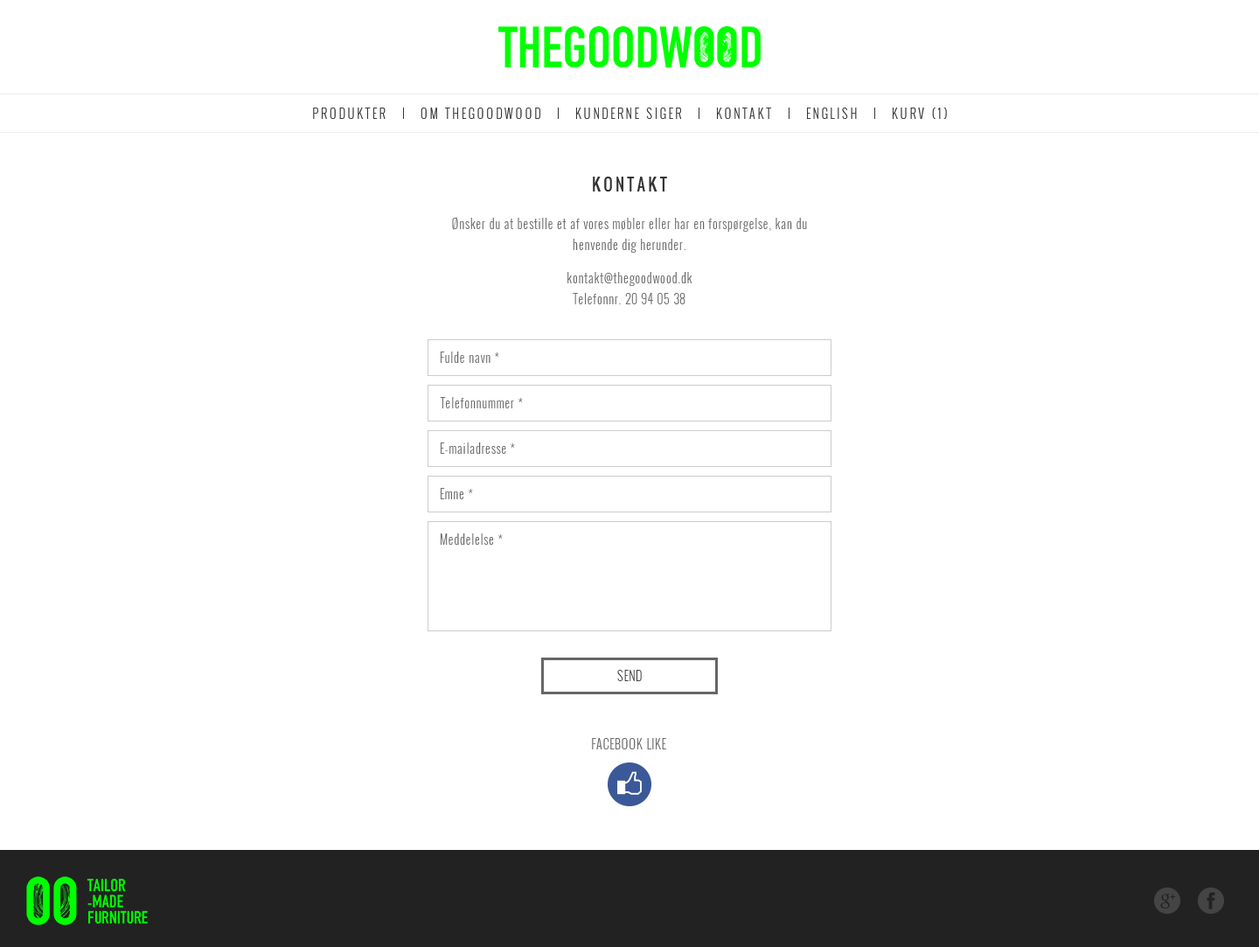
<style>
.page{position:relative;width:1259px;height:947px;background:#ffffff}
.page>*{position:absolute;margin:0}
.t1{font:15.7px "Oswald-Regular";letter-spacing:0.2em;color:#333333;text-transform:uppercase}
.t2{font:12.2px/21px "Oswald-Light";letter-spacing:0.05em;color:#666666}
.t3{font:12.2px/16.6px "Oswald-Light";letter-spacing:0.05em;color:#666666}
.t4{font:12.2px "Oswald-Light";letter-spacing:0.05em;color:#666666}
.t5{font:12.2px "Oswald-Light";letter-spacing:0.05em;color:#333333;text-transform:uppercase}
</style>
<div class="page">
<p class="t1" style="left:593px;top:177px;width:74px;height:14px">Kontakt</p>
<p class="t2" style="left:452px;top:217px;width:355px;height:87px;text-align:center">Ønsker du at bestille et af vores møbler eller har en forspørgelse, kan du henvende dig herunder.<br><span class="t3"><br>kontakt@thegoodwood.dk<br></span>Telefonnr. 20 94 05 38</p>
<p class="t4" style="left:441px;top:352px;width:58px;height:11px">Fulde navn *</p>
<p class="t4" style="left:440px;top:397px;width:83px;height:11px">Telefonnummer *</p>
<p class="t4" style="left:441px;top:442px;width:74px;height:12px">E-mailadresse *</p>
<p class="t4" style="left:441px;top:488px;width:32px;height:11px">Emne *</p>
<p class="t4" style="left:441px;top:533px;width:62px;height:12px">Meddelelse *</p>
<p class="t5" style="left:617px;top:670px;width:25px;height:11px">Send</p>
</div>
